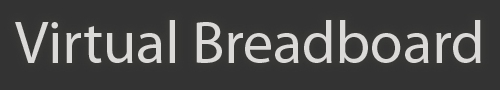
<style>
.page{position:relative;width:500px;height:90px;background:#333333}
.page>*{position:absolute;margin:0}
.t1{font:60px "MyriadPro-Regular";color:#dcd9d9}
</style>
<div class="page">
<p class="t1" style="left:15px;top:20px;width:466px;height:43px">Virtual Breadboard</p>
</div>
